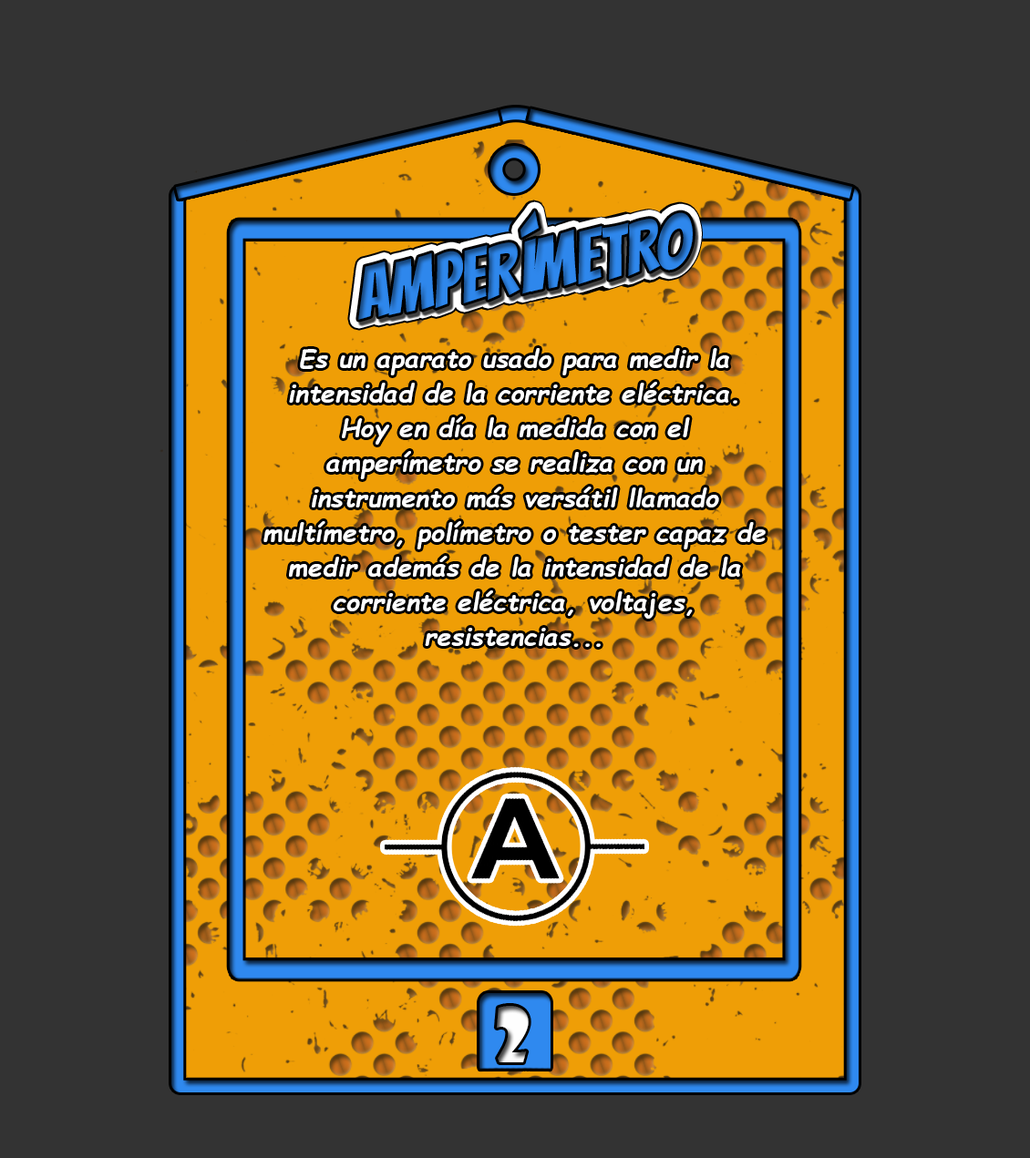
<style>
.page{position:relative;width:1030px;height:1158px;background:#333333}
.page>*{position:absolute;margin:0}
.t1{font:72.7px "Bangers-Regular"}
.t2{font:25.7px/34.8px "ComicSansMS-BoldItalic";color:#ffffff}
.t3{font:75.7px "ShowcardGothic-Reg";color:#fefefe}
</style>
<div class="page">
<p class="t1" style="left:358px;top:210px;width:334px;height:110px;rotate:-9deg">AMPERÍMTERO</p>
<p class="t1" style="left:358px;top:210px;width:334px;height:110px;rotate:-9deg">AMPERÍMETRO</p>
<p class="t1" style="left:358px;top:210px;width:334px;height:110px;rotate:-9deg">AMPERÍMETRO</p>
<p class="t2" style="left:263px;top:348px;width:502px;height:299px;text-align:center">Es un aparato usado para medir la intensidad de la corriente eléctrica.<br>Hoy en día la medida con el amperímetro se realiza con un instrumento más versátil llamado multímetro, polímetro o tester capaz de medir además de la intensidad de la corriente eléctrica, voltajes, resistencias...</p>
<p class="t3" style="left:496px;top:1006px;width:32px;height:56px">2</p>
</div>
